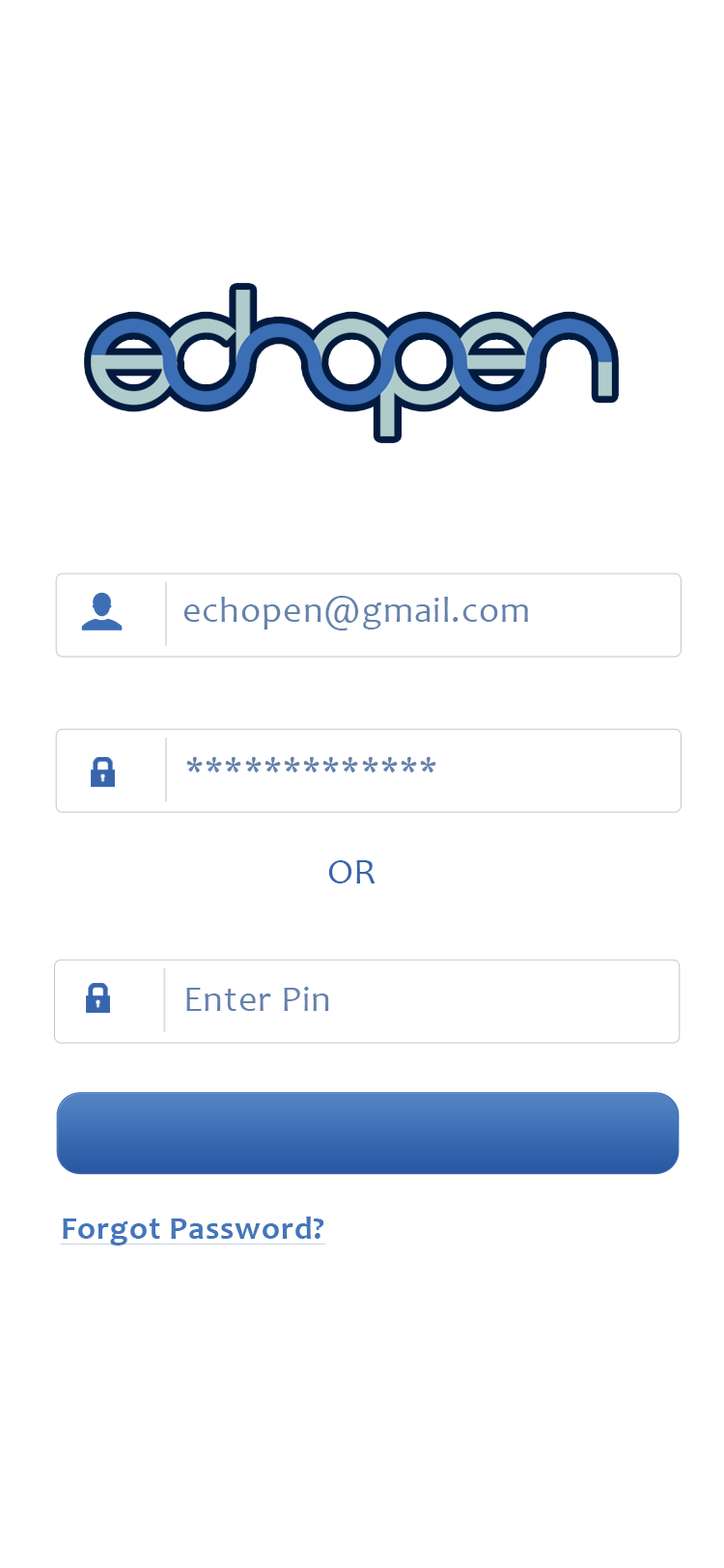
<style>
.page{position:relative;width:724px;height:1568px;background:#ffffff}
.page>*{position:absolute;margin:0}
.t1{font:35.9px "Candara";letter-spacing:0.02em;color:#6582ac;scale:1.03 1}
.t2{font:36px "Candara";letter-spacing:0.02em;color:#3665ae;scale:1.03 1}
.t3{font:32.2px "Candara-Bold";letter-spacing:0.02em;color:#4476b9;text-decoration:underline;scale:1.03 1}
</style>
<div class="page">
<p class="t1" style="left:183px;top:596px;width:345px;height:34px">echopen@gmail.com</p>
<p class="t1" style="left:186px;top:757px;width:250px;height:15px">*************</p>
<p class="t2" style="left:328px;top:860px;width:48px;height:23px">OR</p>
<p class="t1" style="left:186px;top:987px;width:143px;height:24px">Enter Pin</p>
<p class="t3" style="left:60px;top:1217px;width:266px;height:29px">Forgot Password?</p>
</div>
